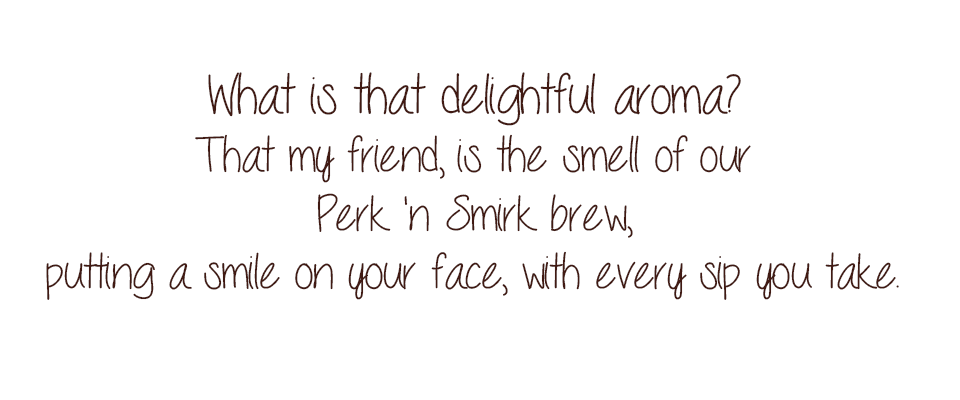
<style>
.page{position:relative;width:960px;height:400px;background:#ffffff}
.page>*{position:absolute;margin:0}
.t1{font:51.6px/58.1px "Seriously";color:#411a13}
.t2{font:58.1px/58.1px "Seriously";color:#411a13}
</style>
<div class="page">
<p class="t1" style="left:46px;top:72px;width:853px;height:228px;text-align:center"><span class="t2">What is that delightful aroma?<br></span>That my friend, is the smell of our<br>Perk 'n Smirk brew,<br>putting a smile on your face, with every sip you take.</p>
</div>
